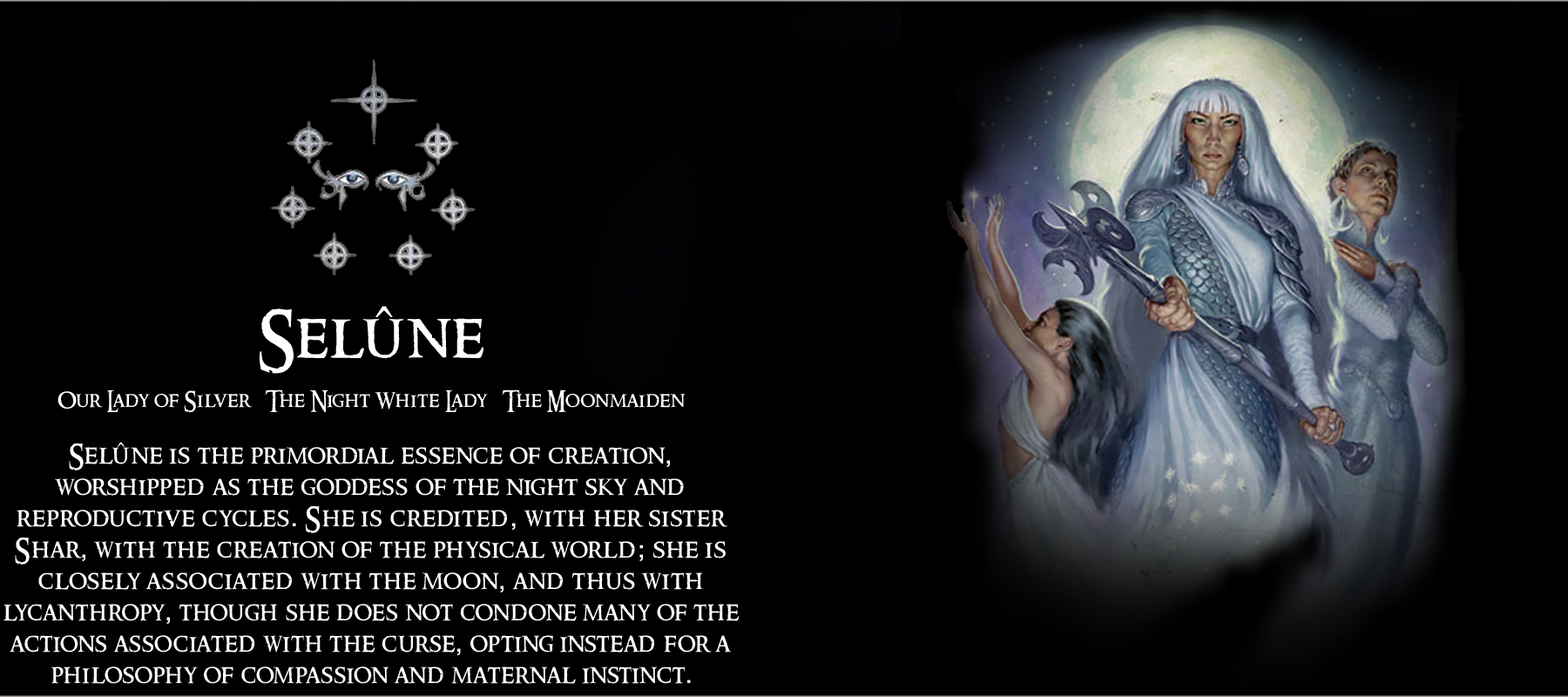
<style>
.page{position:relative;width:1568px;height:697px;background:#000000}
.page>*{position:absolute;margin:0}
.t1{font:26.1px "RingbearerMedium";letter-spacing:0.025em;color:#ffffff}
.t2{font:62.7px "RingbearerMedium";letter-spacing:0.025em;color:#ffffff}
.t3{font:20.9px "RingbearerMedium";letter-spacing:0.025em;color:#ffffff}
.t4{font:26.1px "Rockwell";letter-spacing:0.025em;color:#ffffff}
</style>
<div class="page">
<p class="t1" style="left:3px;top:306px;width:736px;height:378px;text-align:center"><span class="t2">Selûne<br></span><span class="t3"><br>Our Lady of Silver   The Night White Lady   The Moonmaiden<br><br></span>Selûne is the primordial essence of creation<span class="t4">,</span> <br>worshipped as the goddess of the night sky and <br>reproductive cycles<span class="t4">.</span> She is credited<span class="t4">,</span> with her sister Shar<span class="t4">,</span> with the creation of the physical world<span class="t4">;</span> she is closely associated with the moon<span class="t4">,</span> and thus with <br>lycanthropy<span class="t4">,</span> though she does not condone many of the actions associated with the curse<span class="t4">,</span> opting instead for a philosophy of compassion and maternal instinct<span class="t4">.</span></p>
</div>
